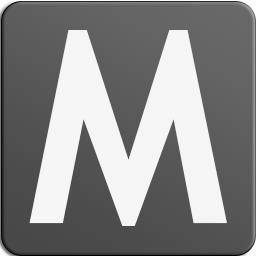
<style>
.page{position:relative;width:256px;height:256px;background:#f5f5f5}
.page>*{position:absolute;margin:0}
.t1{font:270px "TrebuchetMS-Bold";color:#ffffff}
</style>
<div class="page">
<p class="t1" style="left:29px;top:30px;width:198px;height:196px">M</p>
</div>
